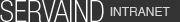
<style>
.page{position:relative;width:180px;height:22px;background:#333333}
.page>*{position:absolute;margin:0}
.t1{font:30px "HelveticaNeueLTStd-ThCn";color:#ffffff}
.t2{font:12px "Helvetica";color:#d4d4d4}
</style>
<div class="page">
<p class="t1" style="left:0px;top:0px;width:104px;height:22px">SERVAIND</p>
<p class="t2" style="left:110px;top:7px;width:60px;height:9px">INTRANET</p>
</div>
